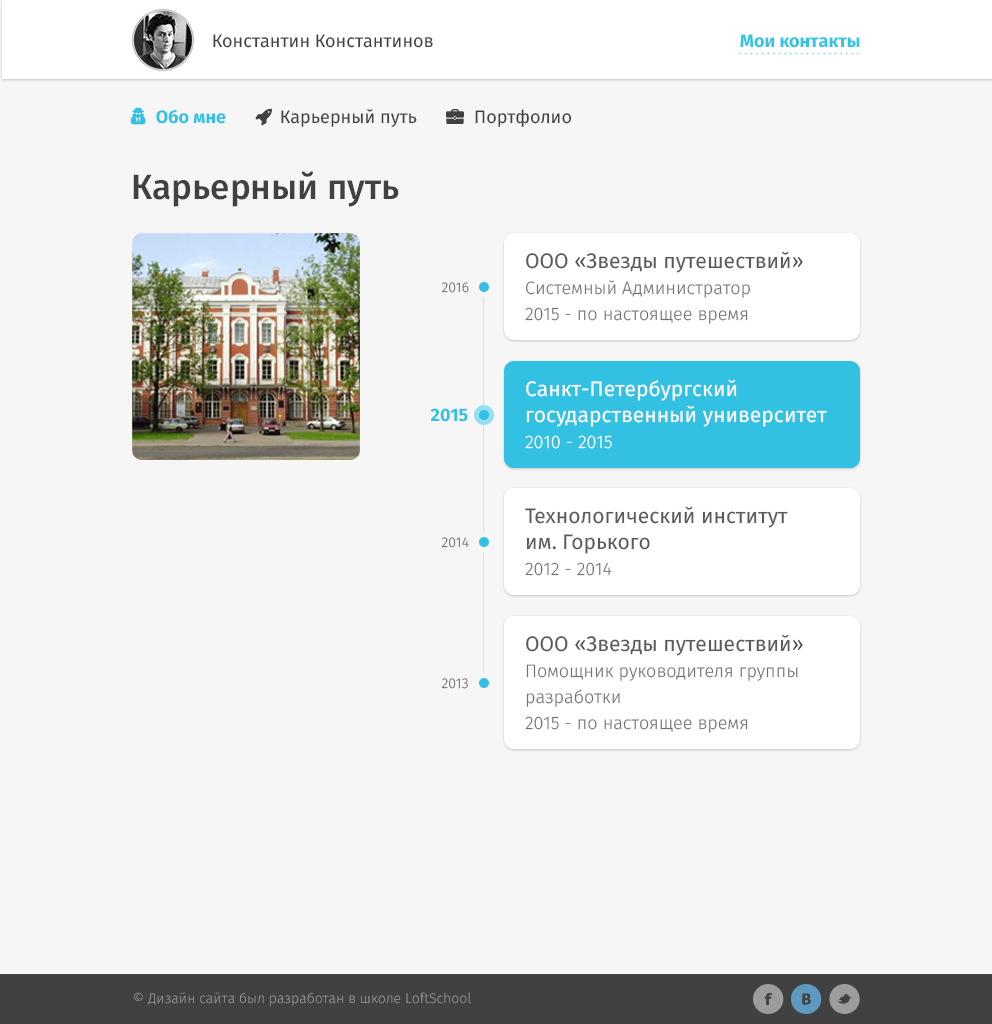
<style>
.page{position:relative;width:992px;height:1024px;background:#f6f6f6}
.page>*{position:absolute;margin:0}
.t1{font:18px "FiraSans-Regular";color:#414141}
.t2{font:18px "FiraSans-Bold";color:#32c3e5}
.t3{font:35px "FiraSans-Medium";color:#414141}
.t4{font:18px/26px "FiraSans-Light";color:#727272}
.t5{font:21px/26px "FiraSans-Regular";color:#5a5a5a}
.t6{font:21px/26px "FiraSans-Regular";color:#515153}
.t7{font:14px "FiraSans-Light";color:#727272}
.t8{font:21px/26px "FiraSans-Regular";color:#ffffff}
.t9{font:18px/26px "FiraSans-Light";color:#ffffff}
.t10{font:18px "FiraSans-Bold";color:#33c1e3}
.t11{font:14px "FiraSans-Light";color:#9c9c9c}
</style>
<div class="page">
<p class="t1" style="left:213px;top:34px;width:220px;height:14px">Константин Константинов</p>
<p class="t2" style="left:740px;top:34px;width:120px;height:14px">Мои контакты</p>
<p class="t1" style="left:475px;top:109px;width:97px;height:18px">Портфолио</p>
<p class="t3" style="left:133px;top:171px;width:266px;height:36px">Карьерный путь</p>
<p class="t4" style="left:525px;top:251px;width:278px;height:73px"><span class="t5">ООО </span><span class="t6">«</span><span class="t5">Звезды путешествий</span><span class="t6">»<br></span>Системный Администратор<br>2015 - по настоящее время</p>
<p class="t7" style="left:441px;top:282px;width:28px;height:11px">2016</p>
<p class="t8" style="left:525px;top:379px;width:302px;height:70px">Санкт-Петербургский государственный университет<br><span class="t9">2010 - 2015</span></p>
<p class="t10" style="left:430px;top:408px;width:38px;height:14px">2015</p>
<p class="t5" style="left:525px;top:506px;width:263px;height:70px">Технологический институт <br>им. Горького<br><span class="t4">2012 - 2014</span></p>
<p class="t7" style="left:441px;top:537px;width:28px;height:11px">2014</p>
<p class="t4" style="left:525px;top:634px;width:278px;height:99px"><span class="t5">ООО </span><span class="t6">«</span><span class="t5">Звезды путешествий</span><span class="t6">»<br></span>Помощник руководителя группы разработки<br>2015 - по настоящее время</p>
<p class="t7" style="left:441px;top:678px;width:27px;height:11px">2013</p>
<p class="t11" style="left:134px;top:992px;width:337px;height:14px">© Дизайн сайта был разработан в школе LoftSchool</p>
</div>
